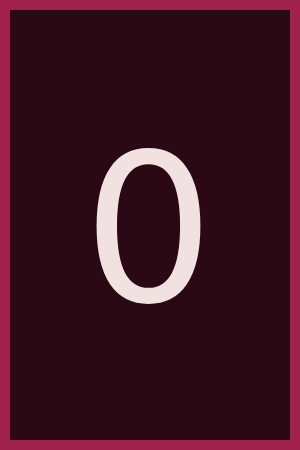
<style>
.page{position:relative;width:300px;height:450px;background:#2a0914}
.page>*{position:absolute;margin:0}
.t1{font:206px "DejaVuSans";color:#f2e1e1}
</style>
<div class="page">
<p class="t1" style="left:96px;top:148px;width:105px;height:156px">0</p>
</div>
